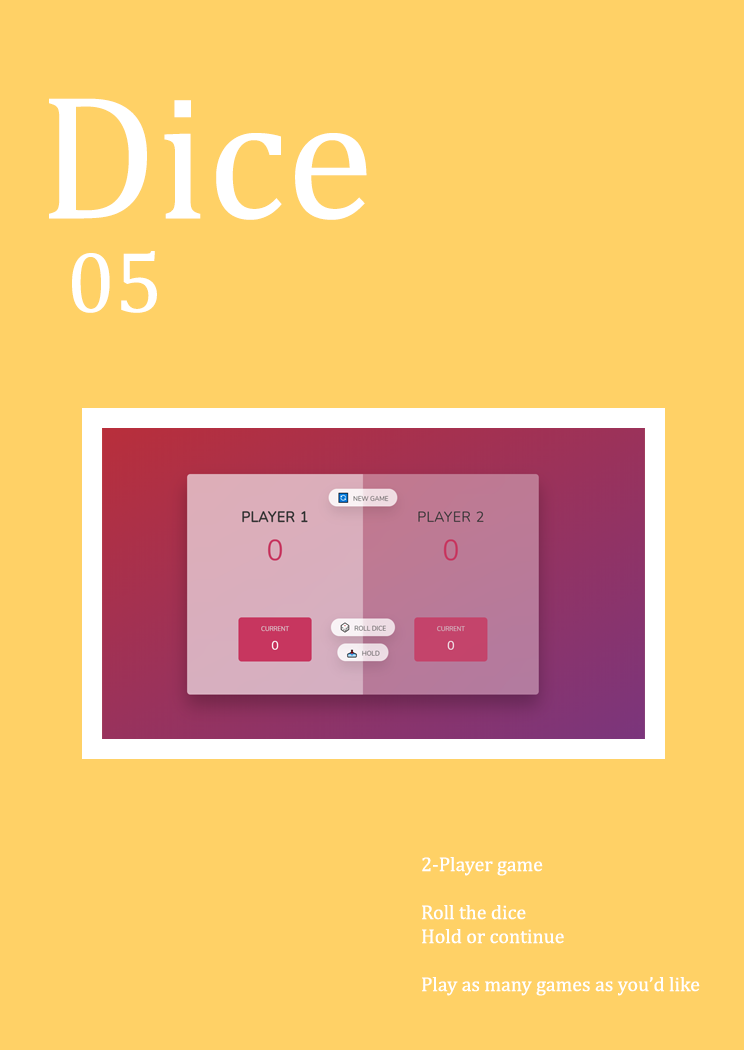
<style>
.page{position:relative;width:744px;height:1050px;background:#ffd166}
.page>*{position:absolute;margin:0}
.t1{font:179.3px "Cambria";color:#ffffff}
.t2{font:87.3px "Cambria";color:#ffffff}
.t3{font:20px "Cambria";color:#ffffff}
</style>
<div class="page">
<p class="t1" style="left:49px;top:98px;width:318px;height:122px">Dice</p>
<p class="t2" style="left:72px;top:251px;width:85px;height:62px">05</p>
<p class="t3" style="left:422px;top:857px;width:278px;height:139px">2-Player game<br><br>Roll the dice<br>Hold or continue<br><br>Play as many games as you’d like</p>
</div>
